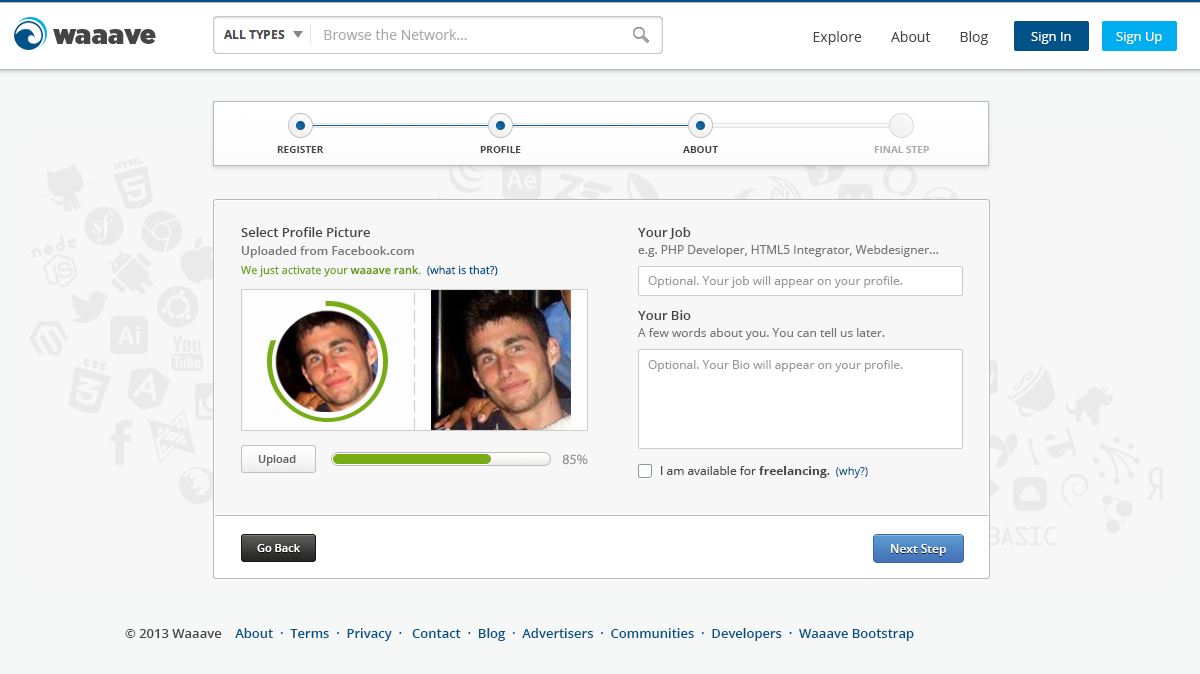
<style>
.page{position:relative;width:1200px;height:674px;background:#f7f7f7}
.page>*{position:absolute;margin:0}
.t1{font:14px "OpenSans";color:#a9a9a9}
.t2{font:14px "OpenSans";color:#454545}
.t3{font:13px "OpenSans";color:#ffffff}
.t4{font:10px "OpenSans-Bold";color:#454545}
.t5{font:10px "OpenSans-Bold";color:#aaaaaa}
.t6{font:13px "OpenSans-Semibold";color:#454545}
.t7{font:12px "OpenSans-Semibold";color:#757575}
.t8{font:12px "OpenSans";color:#757575}
.t9{font:11px "OpenSans";color:#6c9e1b}
.t10{font:11px "OpenSans-Semibold";color:#6c9e1b}
.t11{font:11px "OpenSans";color:#015289}
.t12{font:12px "OpenSans";color:#999999}
.t13{font:11px "OpenSans-Semibold";color:#626262}
.t14{font:14px "MyriadPro-Regular";color:#999999}
.t15{font:12px "OpenSans";color:#454545}
.t16{font:12px "OpenSans-Bold";color:#454545}
.t17{font:11px "OpenSans-Semibold";color:#ffffff}
.t18{font:12px "OpenSans-Semibold";color:#ffffff}
.t19{font:13px "OpenSans-Semibold";color:#015289}
</style>
<div class="page">
<p class="t1" style="left:324px;top:29px;width:143px;height:11px">Browse the Network...</p>
<p class="t2" style="left:813px;top:31px;width:175px;height:14px">Explore        About        Blog</p>
<p class="t3" style="left:1031px;top:32px;width:40px;height:12px">Sign In</p>
<p class="t3" style="left:1116px;top:32px;width:46px;height:12px">Sign Up</p>
<p class="t4" style="left:277px;top:146px;width:47px;height:7px">REGISTER</p>
<p class="t4" style="left:480px;top:146px;width:41px;height:7px">PROFILE</p>
<p class="t4" style="left:683px;top:146px;width:35px;height:7px">ABOUT</p>
<p class="t5" style="left:874px;top:146px;width:55px;height:7px">FINAL STEP</p>
<p class="t6" style="left:241px;top:227px;width:129px;height:10px">Select Profile Picture</p>
<p class="t6" style="left:638px;top:227px;width:53px;height:12px">Your Job</p>
<p class="t7" style="left:241px;top:246px;width:173px;height:12px">Uploaded from Facebook.com</p>
<p class="t8" style="left:638px;top:245px;width:300px;height:12px">e.g. PHP Developer, HTML5 Integrator, Webdesigner...</p>
<p class="t9" style="left:241px;top:265px;width:257px;height:12px">We just activate your <span class="t10">waaave rank</span>.  <span class="t11">(what is that?)</span></p>
<p class="t12" style="left:648px;top:276px;width:255px;height:12px">Optional. Your job will appear on your profile.</p>
<p class="t6" style="left:638px;top:310px;width:53px;height:10px">Your Bio</p>
<p class="t8" style="left:638px;top:328px;width:247px;height:12px">A few words about you. You can tell us later.</p>
<p class="t12" style="left:648px;top:360px;width:255px;height:12px">Optional. Your Bio will appear on your profile.</p>
<p class="t13" style="left:258px;top:455px;width:38px;height:11px">Upload</p>
<p class="t14" style="left:562px;top:454px;width:26px;height:11px">85%</p>
<p class="t15" style="left:661px;top:466px;width:207px;height:12px">I am available for <span class="t16">freelancing</span>.  <span class="t11">(why?)</span></p>
<p class="t17" style="left:257px;top:544px;width:43px;height:8px">Go Back</p>
<p class="t18" style="left:891px;top:544px;width:55px;height:12px">Next Step</p>
<p class="t19" style="left:125px;top:628px;width:789px;height:13px"><span class="t6">© 2013 Waaave</span>    About  ·  Terms  ·  Privacy  ·   Contact  ·  Blog  ·  Advertisers  ·  Communities  ·  Developers  ·  Waaave Bootstrap</p>
</div>
